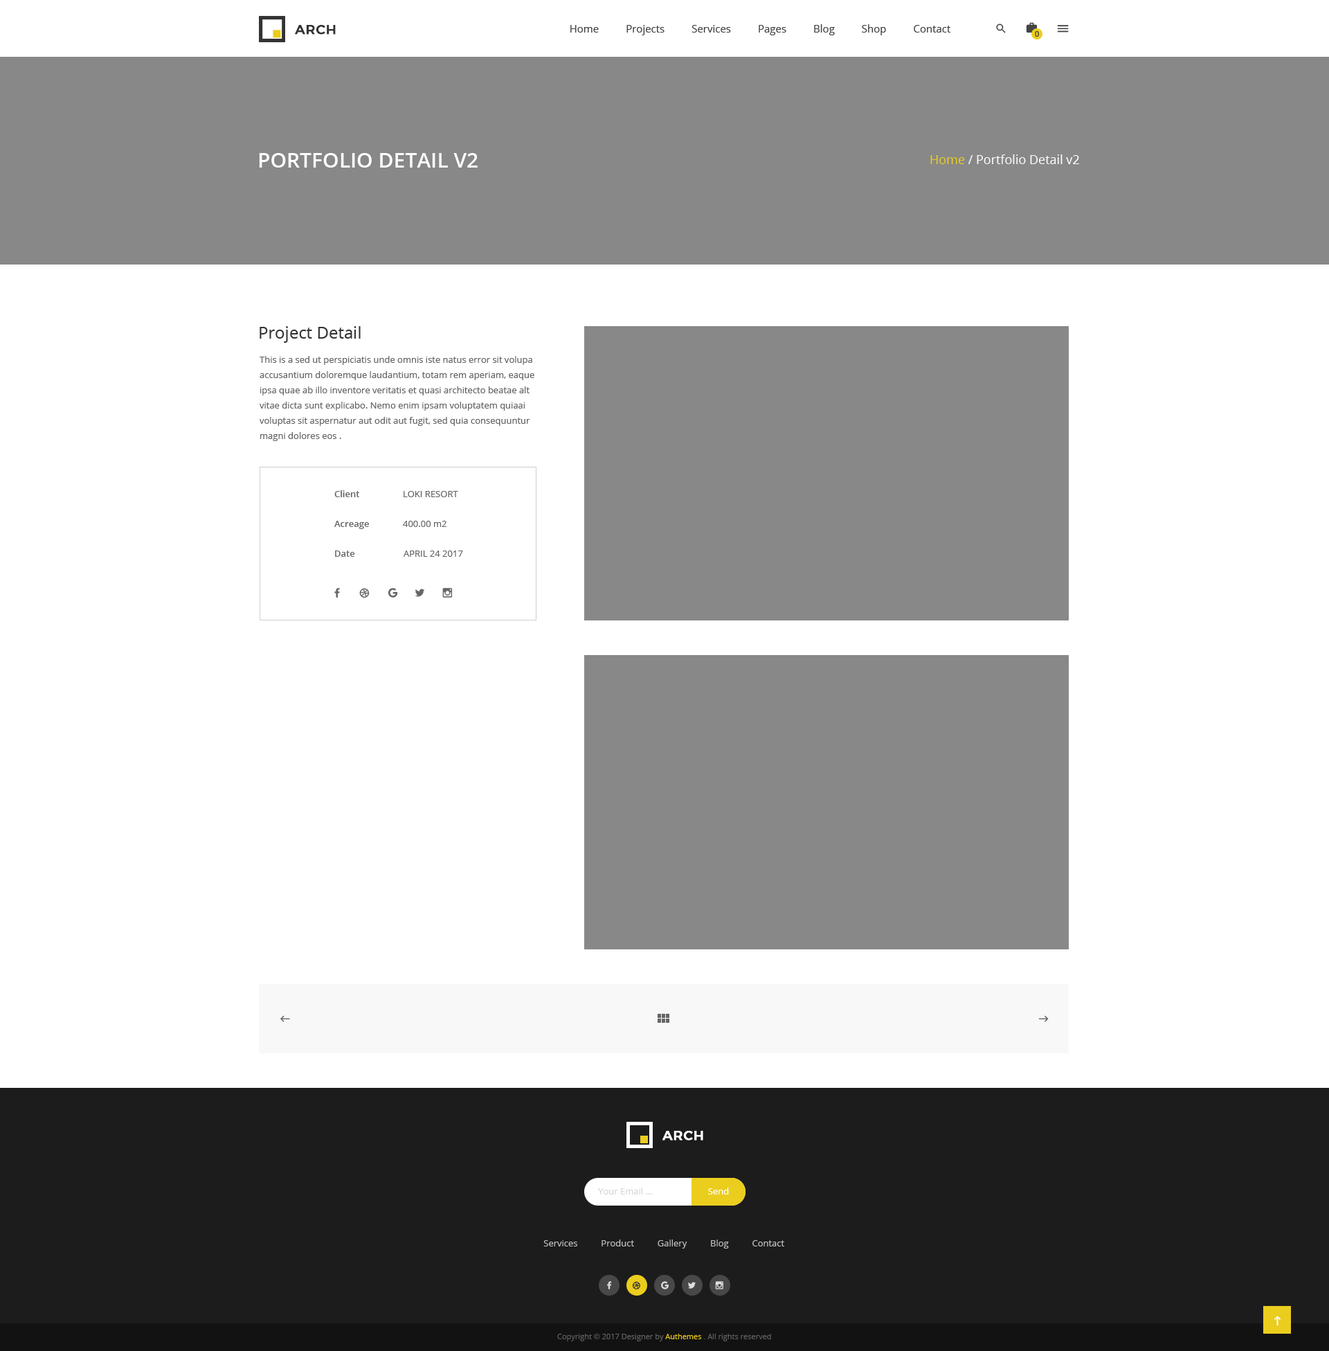
<style>
.page{position:relative;width:1329px;height:1351px;background:#ffffff}
.page>*{position:absolute;margin:0}
.t1{font:13.2px "Montserrat-Medium";letter-spacing:0.025em;color:#333333;text-transform:uppercase;font-weight:bold}
.t2{font:10.4px "OpenSans";color:#444444}
.t3{font:7.6px "OpenSans";color:#333333}
.t4{font:20.8px "OpenSans-Semibold";color:#ffffff;text-transform:uppercase}
.t5{font:12.5px "OpenSans";color:#ffffff}
.t6{font:12.5px "OpenSans";color:#ebcd1e}
.t7{font:16.6px "OpenSans";color:#333333}
.t8{font:9px/15.2px "OpenSans";color:#666666}
.t9{font:9px "OpenSans-Semibold";color:#666666}
.t10{font:9px "OpenSans";color:#666666;text-transform:uppercase}
.t11{font:9px "OpenSans";color:#666666}
.t12{font:13.2px "Montserrat-Medium";letter-spacing:0.025em;color:#ffffff;text-transform:uppercase;font-weight:bold}
.t13{font:9px "OpenSans";color:#d6d6d6}
.t14{font:9px "OpenSans";color:#ffffff}
.t15{font:9px "OpenSans";color:#c2c2c2}
.t16{font:7.6px "OpenSans";color:#626262}
.t17{font:7.6px "OpenSans";color:#ebcd1e}
</style>
<div class="page">
<p class="t1" style="left:295px;top:25px;width:41px;height:10px">arch</p>
<p class="t2" style="left:570px;top:24px;width:381px;height:11px">Home          Projects          Services          Pages          Blog          Shop          Contact</p>
<p class="t3" style="left:1035px;top:31px;width:4px;height:6px">0</p>
<p class="t4" style="left:259px;top:153px;width:219px;height:15px">Portfolio detail v2</p>
<p class="t5" style="left:930px;top:154px;width:149px;height:10px"><span class="t6">Home</span> / Portfolio Detail v2</p>
<p class="t7" style="left:260px;top:326px;width:101px;height:17px">Project Detail</p>
<p class="t8" style="left:260px;top:356px;width:274px;height:85px">This is a sed ut perspiciatis unde omnis iste natus error sit volupa accusantium doloremque laudantium, totam rem aperiam, eaque ipsa quae ab illo inventore veritatis et quasi architecto beatae alt vitae dicta sunt explicabo. Nemo enim ipsam voluptatem quiaai voluptas sit aspernatur aut odit aut fugit, sed quia consequuntur magni dolores eos .</p>
<p class="t9" style="left:334px;top:490px;width:26px;height:7px">Client</p>
<p class="t10" style="left:404px;top:491px;width:54px;height:6px">Loki Resort</p>
<p class="t9" style="left:334px;top:521px;width:35px;height:8px">Acreage</p>
<p class="t11" style="left:403px;top:521px;width:44px;height:6px">400.00 m2</p>
<p class="t9" style="left:335px;top:550px;width:20px;height:7px">Date</p>
<p class="t10" style="left:404px;top:550px;width:59px;height:7px">April 24 2017</p>
<p class="t12" style="left:663px;top:1131px;width:40px;height:9px">arch</p>
<p class="t13" style="left:598px;top:1187px;width:55px;height:7px">Your Email ...</p>
<p class="t14" style="left:708px;top:1187px;width:21px;height:7px">Send</p>
<p class="t15" style="left:543px;top:1239px;width:241px;height:9px">Services          Product          Gallery          Blog          Contact</p>
<p class="t16" style="left:557px;top:1333px;width:214px;height:8px">Copyright © 2017 Designer by <span class="t17">Authemes </span>. All rights reserved</p>
</div>
